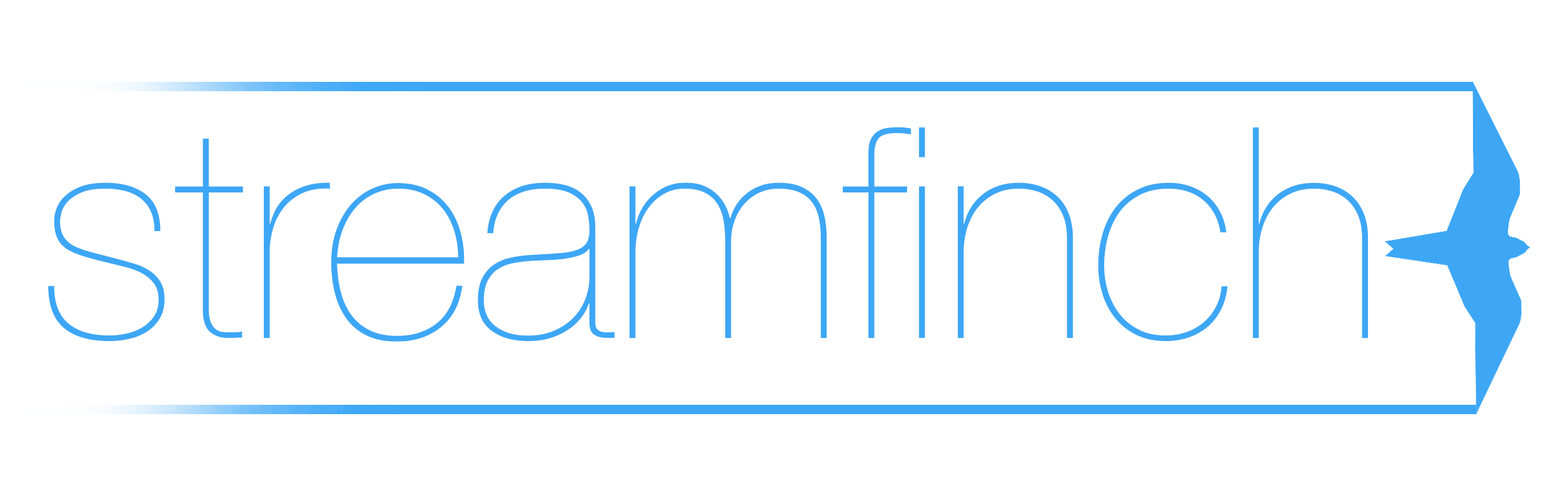
<style>
.page{position:relative;width:1568px;height:491px;background:#ffffff}
.page>*{position:absolute;margin:0}
.t1{font:295.1px "HelveticaNeue-UltraLight";color:#3da7f6}
</style>
<div class="page">
<p class="t1" style="left:48px;top:127px;width:1321px;height:215px">streamfinch</p>
</div>
